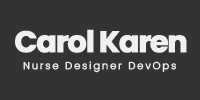
<style>
.page{position:relative;width:200px;height:100px;background:#333333}
.page>*{position:absolute;margin:0}
.t1{font:30px "Poppins-Bold";letter-spacing:-0.06em;color:#f1f1f1;font-weight:bold}
.t2{font:10px "Poppins-Light";letter-spacing:0.16em;color:#f1f1f1;font-weight:bold}
</style>
<div class="page">
<p class="t1" style="left:15px;top:29px;width:172px;height:24px">Carol Karen</p>
<p class="t2" style="left:23px;top:61px;width:153px;height:12px">Nurse Designer DevOps</p>
</div>
